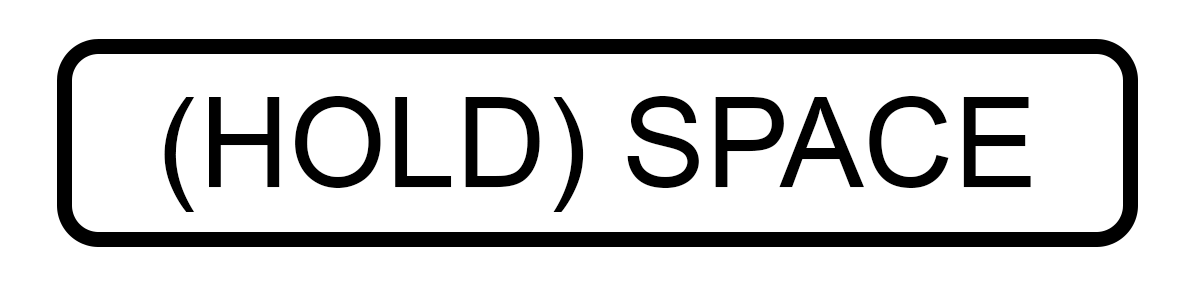
<style>
.page{position:relative;width:1194px;height:285px;background:#ffffff}
.page>*{position:absolute;margin:0}
.t1{font:125px "ArialMT";color:#000000}
</style>
<div class="page">
<p class="t1" style="left:164px;top:96px;width:867px;height:116px">(HOLD) SPACE</p>
</div>
